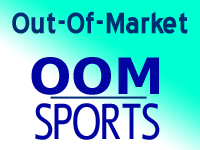
<style>
.page{position:relative;width:200px;height:150px;background:#ffffff}
.page>*{position:absolute;margin:0}
.t1{font:36px "BlueHighway-Bold";color:#002e72}
.t2{font:50px "DejaVuSans-Bold";color:#0004a1}
.t3{font:50px "LigurinoCondensed";color:#0004a1}
</style>
<div class="page">
<p class="t1" style="left:12px;top:11px;width:176px;height:23px">Out-Of-Market</p>
<p class="t2" style="left:31px;top:57px;width:128px;height:38px">OOM</p>
<p class="t3" style="left:35px;top:103px;width:125px;height:37px">SPORTS</p>
</div>
